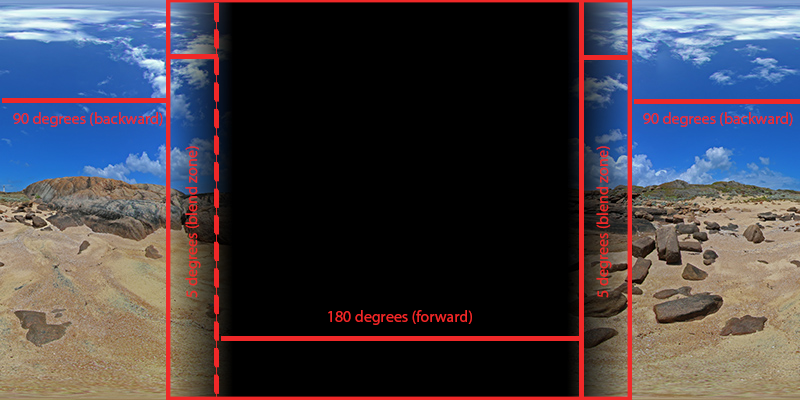
<style>
.page{position:relative;width:800px;height:400px;background:#000000}
.page>*{position:absolute;margin:0}
.t1{font:16px "MyriadPro-Regular";color:#f02828}
</style>
<div class="page">
<p class="t1" style="left:13px;top:112px;width:150px;height:15px">90 degrees (backward)</p>
<p class="t1" style="left:643px;top:112px;width:150px;height:15px">90 degrees (backward)</p>
<p class="t1" style="left:185px;top:146px;width:16px;height:152px;rotate:-90deg">5 degrees (blend zone)</p>
<p class="t1" style="left:596px;top:146px;width:16px;height:152px;rotate:-90deg">5 degrees (blend zone)</p>
<p class="t1" style="left:328px;top:310px;width:144px;height:15px">180 degrees (forward)</p>
</div>
